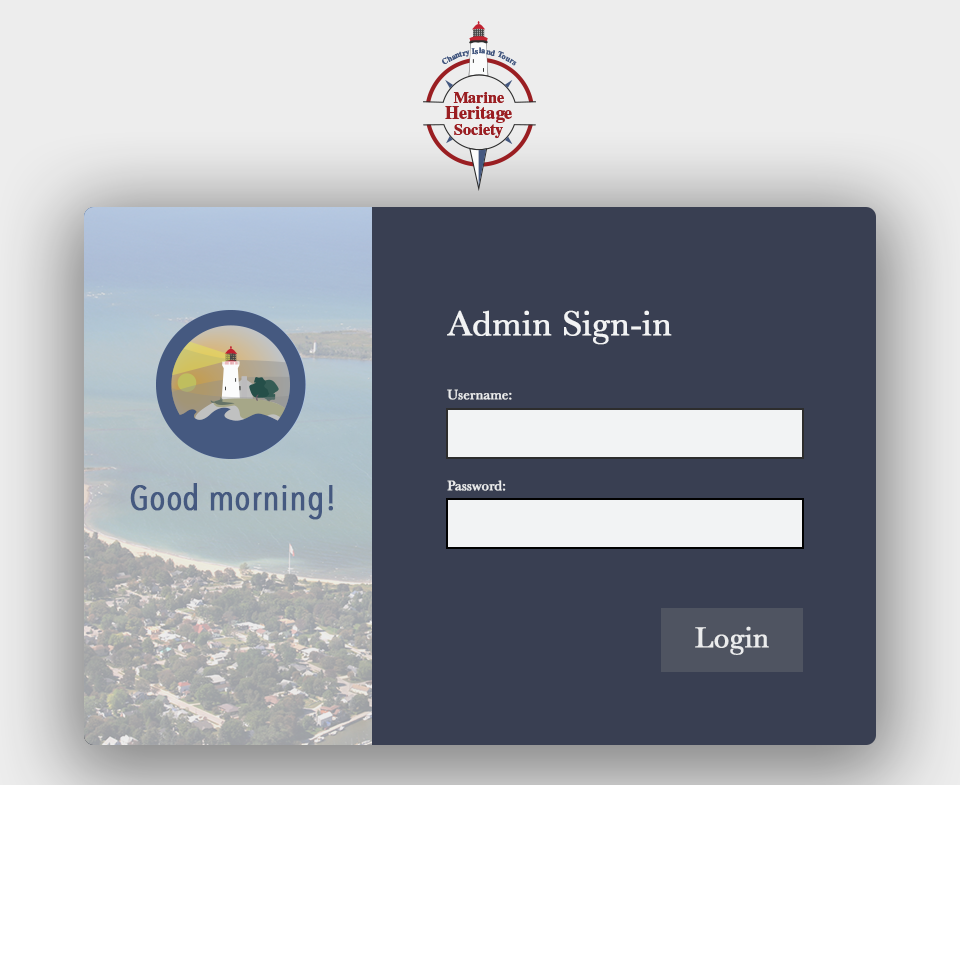
<style>
.page{position:relative;width:960px;height:978px;background:#393f52}
.page>*{position:absolute;margin:0}
.t1{font:36px "Baskerville";color:#f2f3f4;font-weight:bold}
.t2{font:14px "Baskerville";color:#ebeced;font-weight:bold}
.t3{font:36px "AvenirNextCondensed-Regular";color:#455980;font-weight:bold}
.t4{font:30px "Baskerville";color:#ebeced;font-weight:bold}
</style>
<div class="page">
<p class="t1" style="left:447px;top:310px;width:225px;height:35px">Admin Sign-in</p>
<p class="t2" style="left:447px;top:389px;width:65px;height:11px">Username:</p>
<p class="t3" style="left:130px;top:483px;width:203px;height:37px">Good morning!</p>
<p class="t2" style="left:447px;top:480px;width:59px;height:11px">Password:</p>
<p class="t4" style="left:695px;top:626px;width:74px;height:29px">Login</p>
</div>
